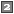
<style>
.page{position:relative;width:14px;height:14px;background:#828282}
.page>*{position:absolute;margin:0}
.t1{font:8.9px "BookmanOldStyle-Bold";color:#ffffff;scale:1.13 1}
</style>
<div class="page">
<p class="t1" style="left:4px;top:4px;width:6px;height:6px">2</p>
<p class="t1" style="left:4px;top:4px;width:6px;height:6px">2</p>
</div>
